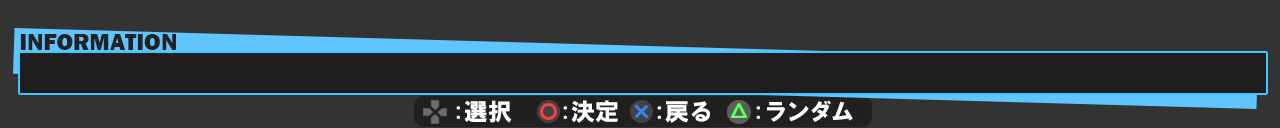
<style>
.page{position:relative;width:1280px;height:128px;background:#333333}
.page>*{position:absolute;margin:0}
.t1{font:24px "FranklinGothic-Heavy";color:#212223}
.t2{font:24px "HGSoeiKakugothicUB";color:#ffffff}
.t3{font:24px "HGSoeiKakugothicUB";letter-spacing:-0.08em;color:#ffffff}
</style>
<div class="page">
<p class="t1" style="left:20px;top:34px;width:156px;height:16px">INFORMATION</p>
<p class="t2" style="left:456px;top:100px;width:56px;height:23px">:選択</p>
<p class="t2" style="left:563px;top:100px;width:55px;height:23px">:決定</p>
<p class="t2" style="left:657px;top:101px;width:53px;height:22px">:戻る</p>
<p class="t3" style="left:756px;top:100px;width:97px;height:22px"><span class="t2">:</span>ランダム</p>
</div>
